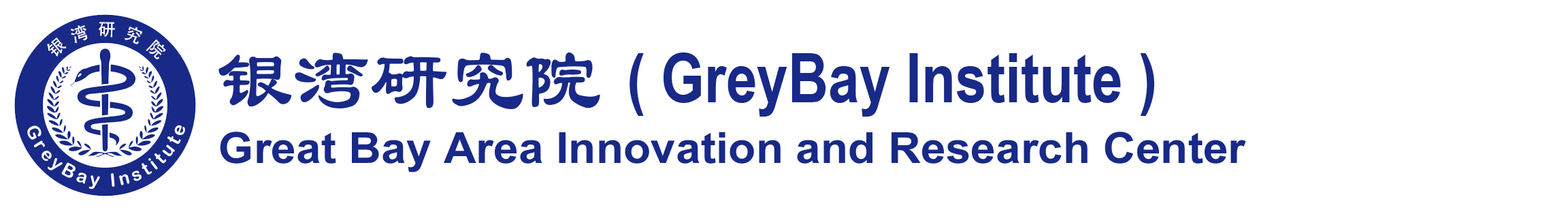
<style>
.page{position:relative;width:1568px;height:210px;background:#ffffff}
.page>*{position:absolute;margin:0}
.t1{font:17.4px "AdobeHeitiStd-Regular";color:#ffffff}
.t2{font:89.5px "STBaoliSC-Regular";color:#182987;scale:0.86 1}
.t3{font:68.1px "ArialNarrow-Bold";color:#182987}
.t4{font:42.9px "ArialNarrow-Bold";color:#182987;scale:1.28 1}
</style>
<div class="page">
<p class="t1" style="left:47px;top:22px;width:119px;height:37px;rotate:-106deg">银  湾  研  究  院</p>
<p class="t2" style="left:218px;top:52px;width:382px;height:58px">银湾研究院</p>
<p class="t3" style="left:630px;top:52px;width:524px;height:64px">( GreyBay Institute )</p>
<p class="t4" style="left:220px;top:131px;width:1026px;height:41px">Great Bay Area Innovation and Research Center</p>
</div>
